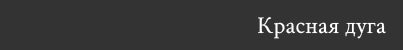
<style>
.page{position:relative;width:403px;height:50px;background:#333333}
.page>*{position:absolute;margin:0}
.t1{font:24px "CrimsonText-Regular";color:#ffffff}
</style>
<div class="page">
<p class="t1" style="left:258px;top:17px;width:128px;height:22px">Красная дуга</p>
</div>
